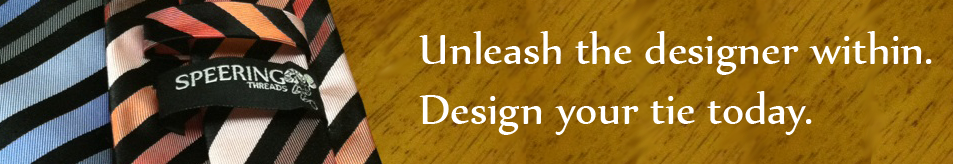
<style>
.page{position:relative;width:953px;height:164px}
.page>*{position:absolute;margin:0}
.t1{font:50px "Nyala-Regular";color:#ffffff}
</style>
<div class="page">
<p class="t1" style="left:419px;top:31px;width:513px;height:104px">Unleash the designer within. Design your tie today.</p>
</div>
